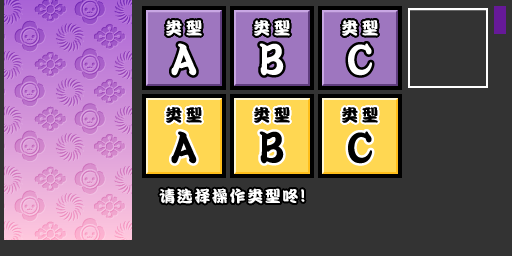
<style>
.page{position:relative;width:512px;height:256px;background:#333333}
.page>*{position:absolute;margin:0}
.t1{font:17px "DFPKanTingLiuW9";letter-spacing:0.2em;color:#ffffff}
.t2{font:17px "DFPKanTingLiuW9";letter-spacing:0.2em;color:#000000}
.t3{font:16px "DFPKanTingLiuW9";letter-spacing:0.1em;color:#ffffff}
.t4{font:18px "DFPKanTingLiuW9";letter-spacing:0.1em;color:#ffffff}
</style>
<div class="page">
<p class="t1" style="left:166px;top:20px;width:36px;height:16px">类型</p>
<p class="t1" style="left:254px;top:20px;width:36px;height:16px">类型</p>
<p class="t1" style="left:342px;top:20px;width:36px;height:16px">类型</p>
<p class="t2" style="left:166px;top:107px;width:36px;height:16px">类型</p>
<p class="t2" style="left:254px;top:107px;width:36px;height:16px">类型</p>
<p class="t2" style="left:342px;top:107px;width:36px;height:16px">类型</p>
<p class="t3" style="left:159px;top:188px;width:146px;height:16px">请选择操作类型咚<span class="t4">!</span></p>
</div>
